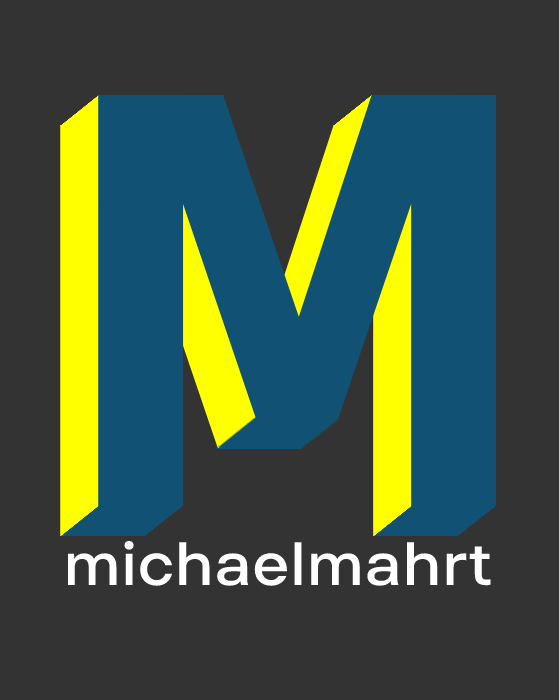
<style>
.page{position:relative;width:559px;height:700px;background:#333333}
.page>*{position:absolute;margin:0}
.t1{font:70px "HelmetNeue-Regular";color:#ffffff}
</style>
<div class="page">
<p class="t1" style="left:67px;top:540px;width:424px;height:46px">michaelmahrt</p>
</div>
